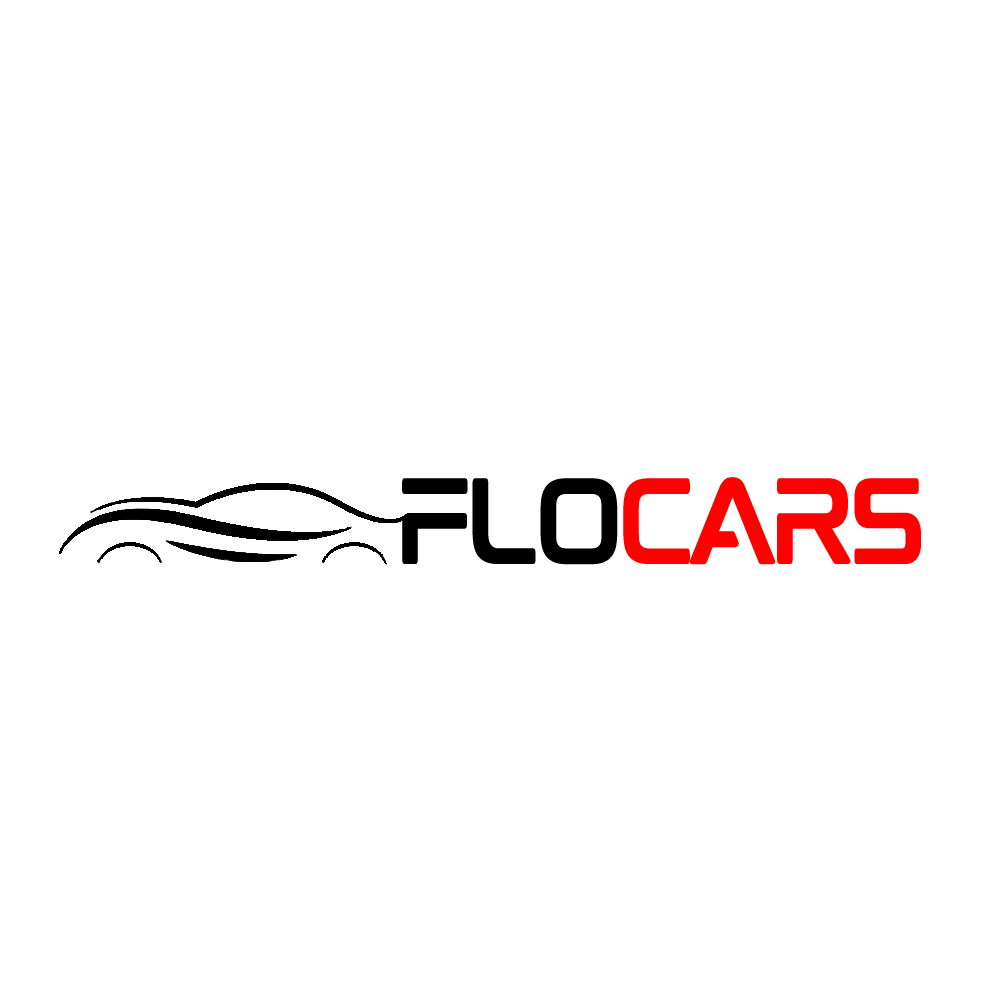
<style>
.page{position:relative;width:1000px;height:1000px;background:#ffffff}
.page>*{position:absolute;margin:0}
.t1{font:124.5px "Mokoto-Regular";color:#ff0000}
.t2{font:124.5px "Mokoto-Regular";color:#000000}
</style>
<div class="page">
<p class="t1" style="left:402px;top:477px;width:519px;height:88px"><span class="t2">FLO</span>CARS</p>
</div>
